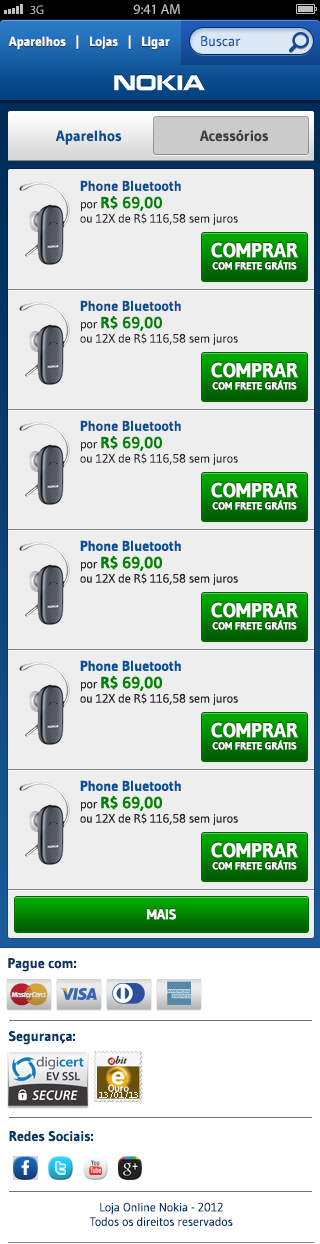
<style>
.page{position:relative;width:320px;height:1244px;background:#eeeeee}
.page>*{position:absolute;margin:0}
.t1{font:12.3px "MyriadPro-Regular";color:#bfbfbf}
.t2{font:14px "MyriadPro-Regular";color:#bfbfbf}
.t3{font:13px "Gudea-Bold";color:#ffffff}
.t4{font:14px "Gudea";color:#1e58b1}
.t5{font:15px "Gudea-Bold";color:#0b4f91}
.t6{font:15px "Gudea-Bold";color:#404040}
.t7{font:14px "Gudea-Bold";color:#0c5093}
.t8{font:12px "Gudea";color:#262626}
.t9{font:16px "Gudea-Bold";color:#008300}
.t10{font:10.1px "Gudea-Bold";color:#ffffff;text-transform:uppercase}
.t11{font:20.2px "Gudea-Bold";color:#ffffff;text-transform:uppercase}
.t12{font:14px "Gudea-Bold";color:#ffffff;text-transform:uppercase}
.t13{font:14px "Gudea-Bold";color:#063665}
.t14{font:12px "Gudea";color:#063665}
</style>
<div class="page">
<p class="t1" style="left:30px;top:5px;width:14px;height:9px">3G</p>
<p class="t2" style="left:133px;top:4px;width:47px;height:10px">9:41 AM</p>
<p class="t3" style="left:8px;top:35px;width:162px;height:15px">Aparelhos   |   Lojas   |   Ligar</p>
<p class="t4" style="left:201px;top:36px;width:40px;height:11px">Buscar</p>
<p class="t5" style="left:55px;top:130px;width:67px;height:15px">Aparelhos</p>
<p class="t6" style="left:199px;top:129px;width:69px;height:13px">Acessórios</p>
<p class="t7" style="left:80px;top:180px;width:101px;height:11px">Phone Bluetooth</p>
<p class="t8" style="left:80px;top:196px;width:158px;height:30px">por <span class="t9">R$ 69,00</span><br>ou 12X de R$ 116,58 sem juros</p>
<p class="t10" style="left:211px;top:242px;width:87px;height:28px;text-align:center"><span class="t11">Comprar<br></span>com frete Grátis</p>
<p class="t7" style="left:80px;top:300px;width:101px;height:11px">Phone Bluetooth</p>
<p class="t8" style="left:80px;top:316px;width:158px;height:30px">por <span class="t9">R$ 69,00</span><br>ou 12X de R$ 116,58 sem juros</p>
<p class="t10" style="left:211px;top:362px;width:87px;height:28px;text-align:center"><span class="t11">Comprar<br></span>com frete Grátis</p>
<p class="t7" style="left:80px;top:420px;width:101px;height:11px">Phone Bluetooth</p>
<p class="t8" style="left:80px;top:436px;width:158px;height:30px">por <span class="t9">R$ 69,00</span><br>ou 12X de R$ 116,58 sem juros</p>
<p class="t10" style="left:211px;top:482px;width:87px;height:28px;text-align:center"><span class="t11">Comprar<br></span>com frete Grátis</p>
<p class="t12" style="left:147px;top:909px;width:29px;height:11px">Mais</p>
<p class="t13" style="left:8px;top:958px;width:68px;height:14px">Pague com:</p>
<p class="t13" style="left:8px;top:1031px;width:67px;height:14px">Segurança:</p>
<p class="t13" style="left:9px;top:1131px;width:84px;height:11px">Redes Sociais:</p>
<p class="t14" style="left:89px;top:1202px;width:144px;height:24px;text-align:center">Loja Online Nokia - 2012<br>Todos os direitos reservados</p>
</div>
